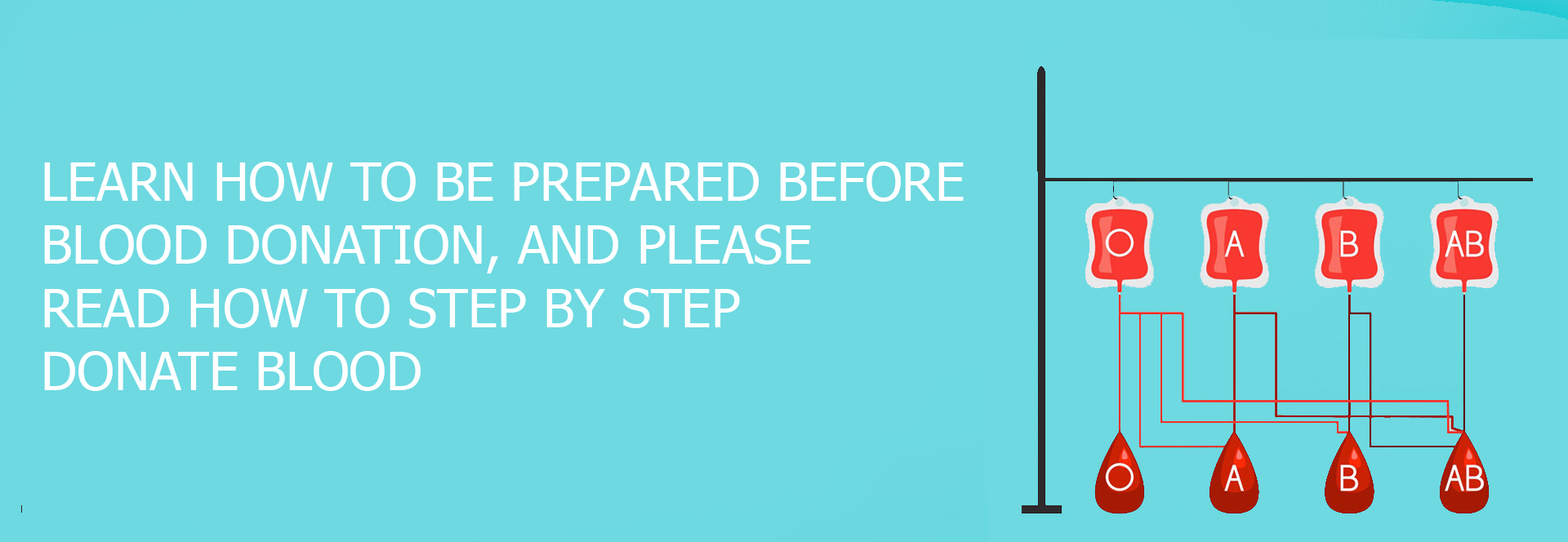
<style>
.page{position:relative;width:1568px;height:542px;background:#6ed9e1}
.page>*{position:absolute;margin:0}
.t1{font:52.8px "Tahoma";color:#ffffff}
</style>
<div class="page">
<p class="t1" style="left:44px;top:162px;width:920px;height:229px">LEARN HOW TO BE PREPARED BEFORE <br>BLOOD DONATION, AND PLEASE <br>READ HOW TO STEP BY STEP <br>DONATE BLOOD</p>
</div>
